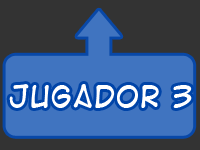
<style>
.page{position:relative;width:200px;height:150px;background:#333333}
.page>*{position:absolute;margin:0}
.t1{font:29.4px "DigitalStrip2";color:#ffffff}
</style>
<div class="page">
<p class="t1" style="left:9px;top:84px;width:183px;height:24px">JUGADOR 3</p>
</div>
